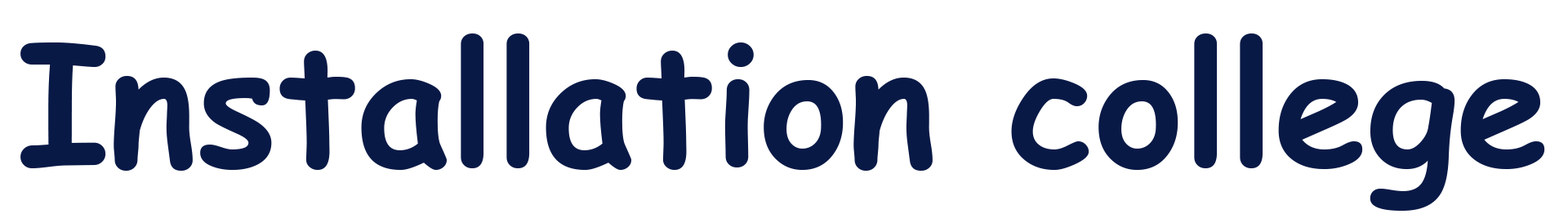
<style>
.page{position:relative;width:1568px;height:214px;background:#ffffff}
.page>*{position:absolute;margin:0}
.t1{font:167.5px "ComicSansMS-Bold";color:#091946}
</style>
<div class="page">
<p class="t1" style="left:20px;top:33px;width:1525px;height:178px">Installation college</p>
</div>
